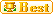
<style>
.page{position:relative;width:53px;height:14px}
.page>*{position:absolute;margin:0}
.t1{font:11px "Dotum";letter-spacing:-0.075em;color:#fdaa05;font-weight:bold}
.t2{font:11px "Dotum";letter-spacing:-0.075em;font-weight:bold}
</style>
<div class="page">
<p class="t1" style="left:30px;top:4px;width:18px;height:8px">est</p>
<p class="t2" style="left:31px;top:4px;width:18px;height:8px">est</p>
</div>
